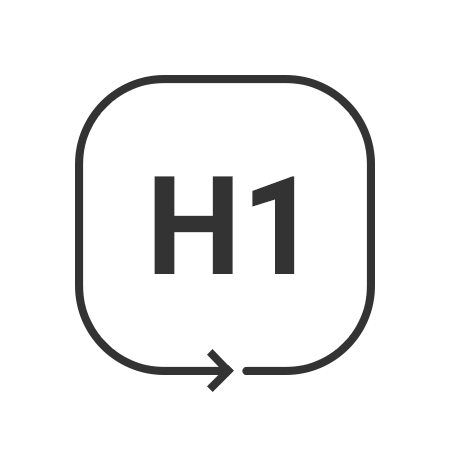
<style>
.page{position:relative;width:450px;height:450px;background:#ffffff}
.page>*{position:absolute;margin:0}
.t1{font:137px "Roboto-Bold";color:#333333}
</style>
<div class="page">
<p class="t1" style="left:154px;top:176px;width:141px;height:98px">H1</p>
</div>
